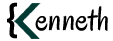
<style>
.page{position:relative;width:113px;height:41px;background:#ffffff}
.page>*{position:absolute;margin:0}
.t1{font:31.5px "Poppins-SemiBold";color:#000000}
.t2{font:34.6px "Oregano-Regular";color:#000000}
</style>
<div class="page">
<p class="t1" style="left:7px;top:2px;width:10px;height:37px">{</p>
<p class="t2" style="left:35px;top:6px;width:73px;height:25px">enneth</p>
</div>
